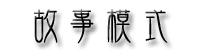
<style>
.page{position:relative;width:200px;height:50px;background:#ffffff}
.page>*{position:absolute;margin:0}
.t1{font:36px "DFJinWen-W3-WIN-BF";color:#000000;font-weight:bold}
</style>
<div class="page">
<p class="t1" style="left:34px;top:9px;width:134px;height:35px">故事模式</p>
</div>
